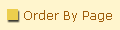
<style>
.page{position:relative;width:120px;height:30px;background:#fff5cd}
.page>*{position:absolute;margin:0}
.t1{font:12px "Verdana";color:#9e5d0b}
</style>
<div class="page">
<p class="t1" style="left:24px;top:10px;width:88px;height:12px">Order By Page</p>
</div>
